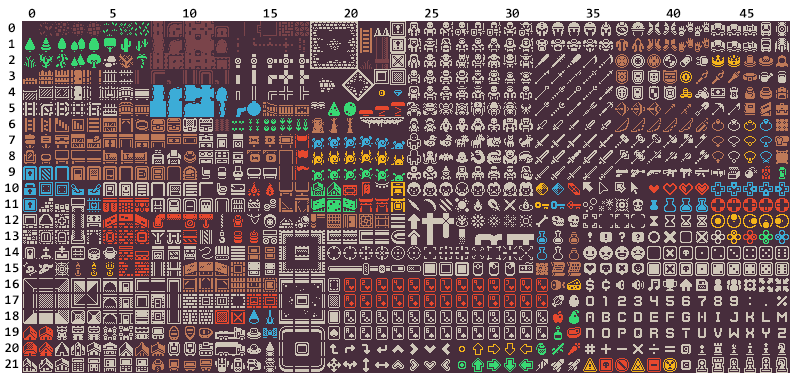
<style>
.page{position:relative;width:790px;height:373px;background:#472d3c}
.page>*{position:absolute;margin:0}
.t1{font:13.3px "Consolas-Bold";color:#000000}
</style>
<div class="page">
<p class="t1" style="left:28px;top:8px;width:726px;height:10px">0          5         10         15         20         25         30         35         40        45</p>
<p class="t1" style="left:5px;top:23px;width:14px;height:345px;text-align:center">0<br>1<br>2<br>3<br>4<br>5<br>6<br>7<br>8<br>9<br>10<br>11<br>12<br>13<br>14<br>15<br>16<br>17<br>18<br>19<br>20<br>21</p>
</div>
